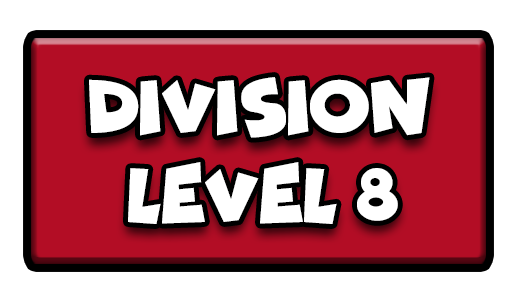
<style>
.page{position:relative;width:517px;height:301px;background:#ffffff}
.page>*{position:absolute;margin:0}
.t1{font:77.7px "Funhouse";color:#ffffff;scale:0.95 1}
</style>
<div class="page">
<p class="t1" style="left:89px;top:77px;width:341px;height:61px">DIVISION</p>
<p class="t1" style="left:128px;top:162px;width:270px;height:62px">LEVEL 8</p>
</div>
